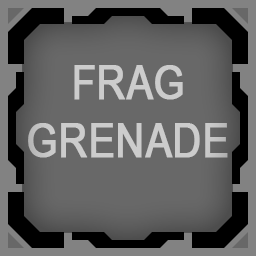
<style>
.page{position:relative;width:256px;height:256px;background:#686868}
.page>*{position:absolute;margin:0}
.t1{font:48px "ArialNarrow";color:#cccccc;text-transform:uppercase;font-weight:bold}
</style>
<div class="page">
<p class="t1" style="left:28px;top:65px;width:200px;height:93px;text-align:center">Frag<br>Grenade</p>
</div>
